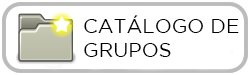
<style>
.page{position:relative;width:250px;height:75px;background:#ffffff}
.page>*{position:absolute;margin:0}
.t1{font:20px "GothamBook";color:#000000}
</style>
<div class="page">
<p class="t1" style="left:84px;top:15px;width:155px;height:42px">CATÁLOGO DE <br>GRUPOS</p>
</div>
